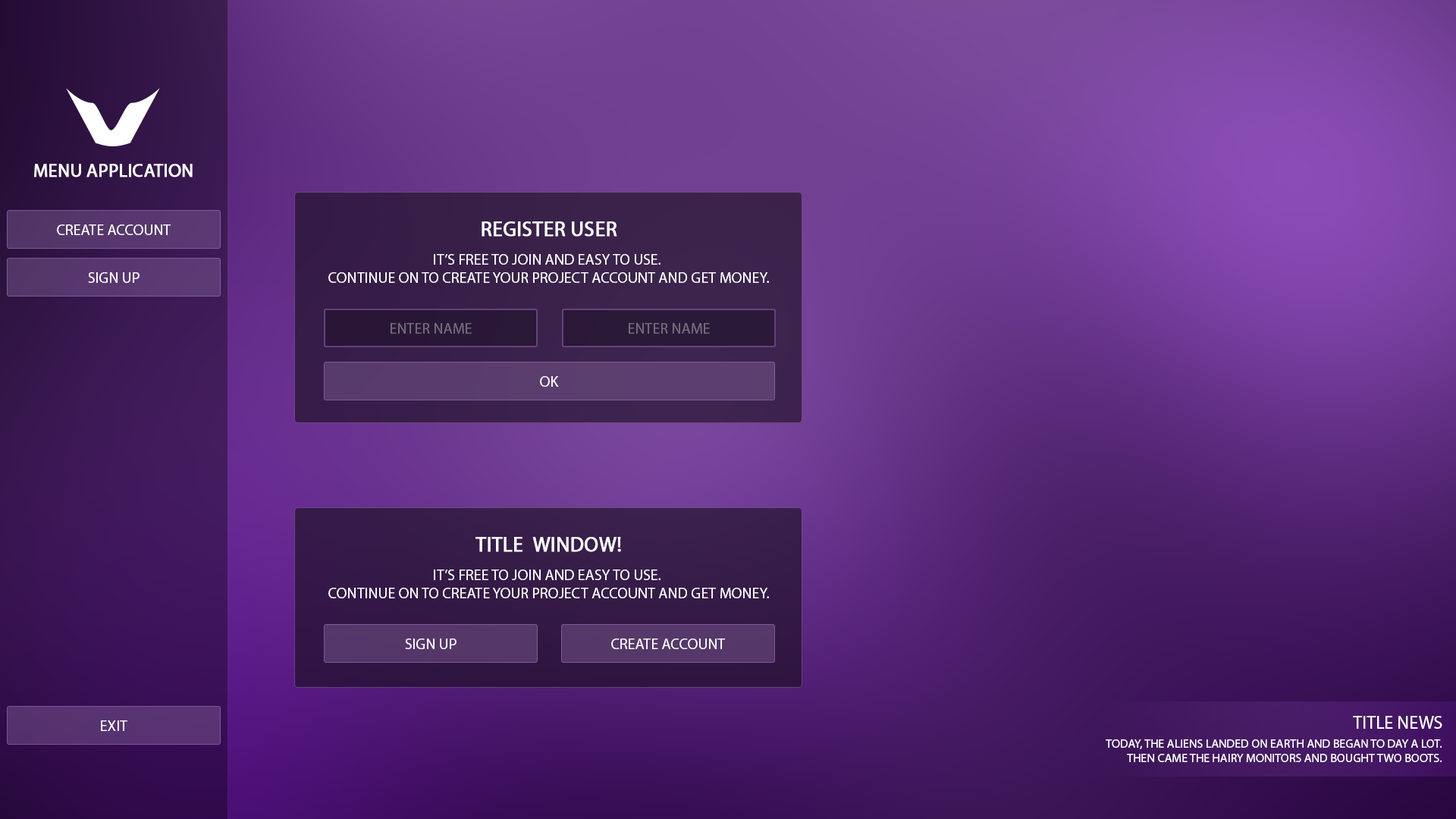
<style>
.page{position:relative;width:1456px;height:819px}
.page>*{position:absolute;margin:0}
.t1{font:18.2px "MyriadPro-Regular";color:#ffffff;text-transform:uppercase;font-weight:bold}
.t2{font:20.5px "MyriadPro-Regular";color:#ffffff;text-transform:uppercase;font-weight:bold}
.t3{font:15.2px "MyriadPro-Regular";color:#ffffff;text-transform:uppercase}
.t4{font:15.2px "MyriadPro-Regular";color:#756e7c;text-transform:uppercase}
.t5{font:15.2px "MyriadPro-Regular";color:#766f7d;text-transform:uppercase}
.t6{font:18.2px "MyriadPro-Regular";color:#ffffff;text-transform:uppercase}
.t7{font:12.1px "MyriadPro-Regular";color:#ffffff;text-transform:uppercase}
</style>
<div class="page">
<p class="t1" style="left:34px;top:164px;width:159px;height:13px">menu application</p>
<p class="t2" style="left:482px;top:221px;width:135px;height:16px">register user</p>
<p class="t3" style="left:57px;top:224px;width:114px;height:11px">create account</p>
<p class="t3" style="left:328px;top:254px;width:441px;height:29px;text-align:center">it’s free to join and easy to use. <br>Continue on to create your project account and get money.</p>
<p class="t3" style="left:88px;top:272px;width:52px;height:11px">sign up</p>
<p class="t4" style="left:391px;top:323px;width:81px;height:11px">enter name</p>
<p class="t5" style="left:629px;top:323px;width:81px;height:11px">enter name</p>
<p class="t3" style="left:540px;top:376px;width:19px;height:11px">ok</p>
<p class="t2" style="left:475px;top:537px;width:146px;height:15px">Title  window!</p>
<p class="t3" style="left:328px;top:570px;width:441px;height:28px;text-align:center">it’s free to join and easy to use. <br>Continue on to create your project account and get money.</p>
<p class="t3" style="left:405px;top:639px;width:52px;height:10px">sign up</p>
<p class="t3" style="left:611px;top:639px;width:114px;height:10px">create account</p>
<p class="t3" style="left:101px;top:720px;width:26px;height:11px">Exit</p>
<p class="t6" style="left:1353px;top:716px;width:89px;height:13px">Title news</p>
<p class="t7" style="left:1106px;top:739px;width:336px;height:23px;text-align:right">today, the aliens landed on earth and began to day a lot.<br>then came the hairy monitors and bought two boots.</p>
</div>
